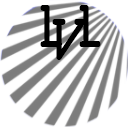
<style>
.page{position:relative;width:128px;height:128px;background:#ffffff}
.page>*{position:absolute;margin:0}
.t1{font:55.3px "PowderworksBRK";color:#000000;scale:0.89 1}
</style>
<div class="page">
<p class="t1" style="left:40px;top:5px;width:61px;height:55px">LvL</p>
</div>
